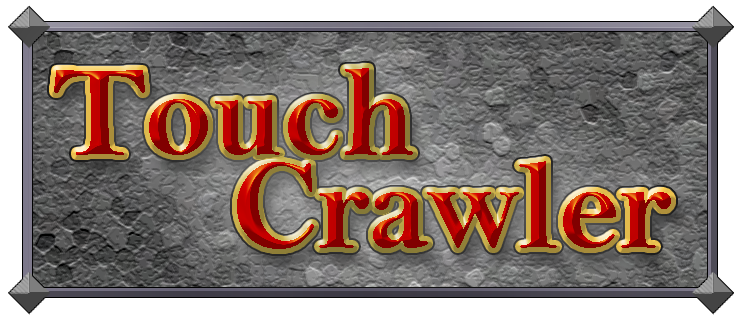
<style>
.page{position:relative;width:740px;height:324px}
.page>*{position:absolute;margin:0}
.t1{font:129px/93px "BellMTBold"}
</style>
<div class="page">
<p class="t1" style="left:54px;top:68px;width:617px;height:181px">Touch<br>Crawler</p>
<p class="t1" style="left:54px;top:68px;width:617px;height:181px">Touch<br>Crawler</p>
<p class="t1" style="left:54px;top:68px;width:617px;height:181px">Touch<br>Crawler</p>
</div>
